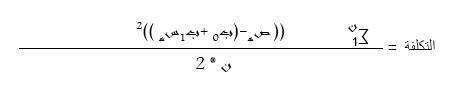
<style>
.page{position:relative;width:455px;height:94px;background:#ffffff}
.page>*{position:absolute;margin:0}
.t1{font:18.7px "Andalus";color:#000000}
.t2{font:16px "Andalus";color:#000000}
.t3{font:12px "ArialMT";color:#000000;scale:0.96 1}
.t4{font:12px "ArialMT";color:#000000}
</style>
<div class="page">
<p class="t1" style="left:136px;top:22px;width:149px;height:19px">2(( صه-(ب0 +ب1سه ))</p>
<p class="t2" style="left:348px;top:24px;width:9px;height:8px">ن</p>
<p class="t3" style="left:358px;top:29px;width:11px;height:15px;rotate:180deg">∑</p>
<p class="t4" style="left:352px;top:37px;width:5px;height:9px">1</p>
<p class="t4" style="left:404px;top:39px;width:31px;height:11px">التكلفة</p>
<p class="t4" style="left:388px;top:45px;width:9px;height:5px">=</p>
<p class="t1" style="left:195px;top:57px;width:37px;height:15px">2 * ن</p>
</div>
